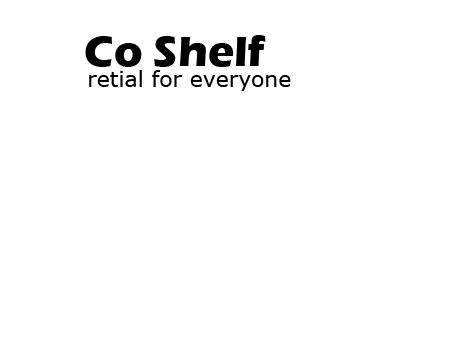
<style>
.page{position:relative;width:454px;height:340px;background:#ffffff}
.page>*{position:absolute;margin:0}
.t1{font:44px "ErasITC-Bold";color:#000000}
.t2{font:22px "Verdana";color:#000000}
</style>
<div class="page">
<p class="t1" style="left:85px;top:35px;width:181px;height:32px">Co Shelf</p>
<p class="t2" style="left:89px;top:70px;width:202px;height:21px">retial for everyone</p>
</div>
